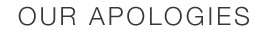
<style>
.page{position:relative;width:265px;height:33px;background:#ffffff}
.page>*{position:absolute;margin:0}
.t1{font:25px "HelveticaNeue-Light";letter-spacing:0.11em;color:#383838}
</style>
<div class="page">
<p class="t1" style="left:18px;top:6px;width:231px;height:20px">OUR APOLOGIES</p>
</div>
